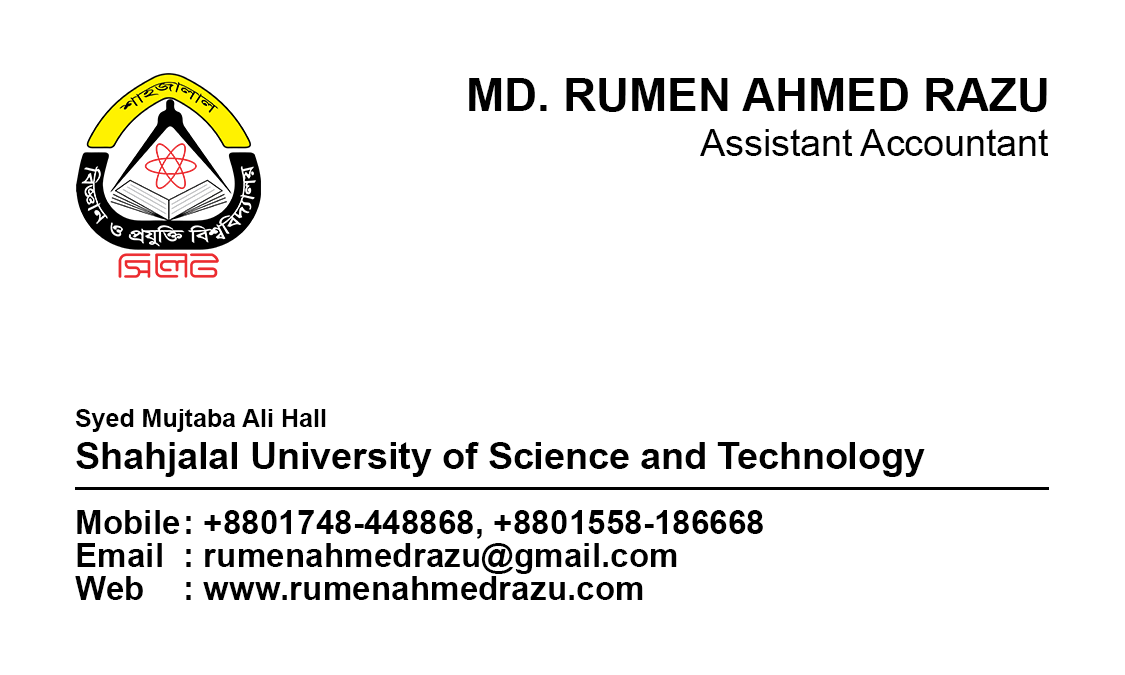
<style>
.page{position:relative;width:1125px;height:675px;background:#ffffff}
.page>*{position:absolute;margin:0}
.t1{font:45.8px "Arial-BoldMT";color:#000000}
.t2{font:37.5px "ArialMT";color:#000000}
.t3{font:37.5px/41.7px "Arial-BoldMT";color:#000000}
.t4{font:25px/29.2px "Arial-BoldMT";color:#000000}
.t5{font:33.3px/33.3px "Arial-BoldMT";color:#000000}
</style>
<div class="page">
<p class="t1" style="left:469px;top:78px;width:578px;height:34px">MD. RUMEN AHMED RAZU</p>
<p class="t2" style="left:700px;top:129px;width:349px;height:27px">Assistant Accountant</p>
<p class="t3" style="left:75px;top:409px;width:850px;height:68px"><span class="t4">Syed Mujtaba Ali Hall<br></span>Shahjalal University of Science and Technology</p>
<p class="t5" style="left:75px;top:510px;width:688px;height:90px">Mobile : +8801748-448868, +8801558-186668<br>Email : rumenahmedrazu@gmail.com<br>Web  : www.rumenahmedrazu.com</p>
</div>
